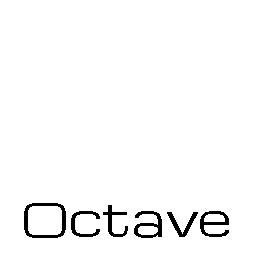
<style>
.page{position:relative;width:256px;height:256px;background:#ffffff}
.page>*{position:absolute;margin:0}
.t1{font:43.9px "Michroma";color:#000000}
</style>
<div class="page">
<p class="t1" style="left:24px;top:203px;width:205px;height:35px">Octave</p>
</div>
